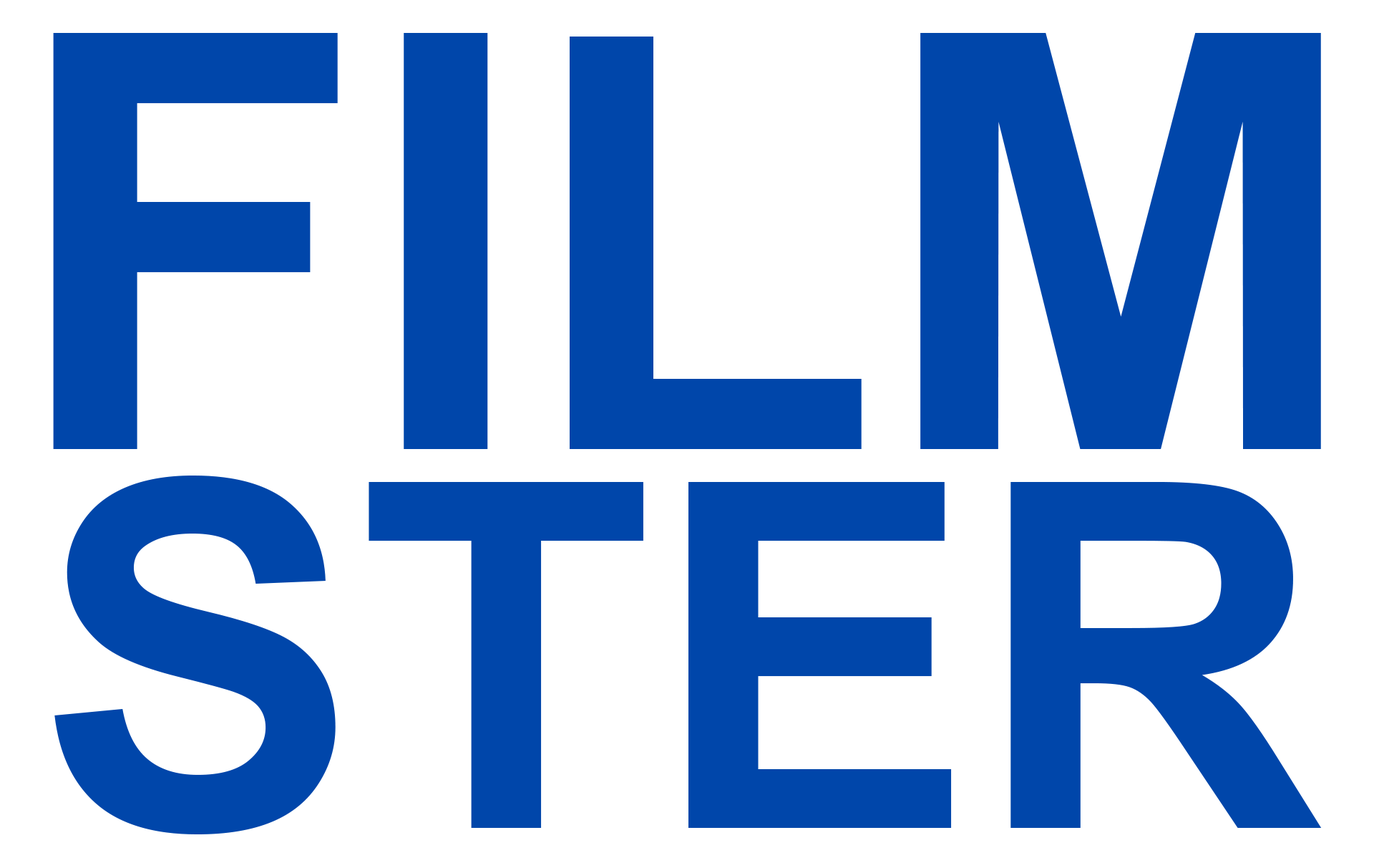
<style>
.page{position:relative;width:1374px;height:868px;background:#ffffff}
.page>*{position:absolute;margin:0}
.t1{font:580.3px "Arial-BoldMT";color:#0046aa}
.t2{font:482.7px "Arial-BoldMT";color:#0046aa}
</style>
<div class="page">
<p class="t1" style="left:53px;top:33px;width:1268px;height:416px">FILM</p>
<p class="t2" style="left:54px;top:475px;width:1268px;height:359px">STER</p>
</div>
